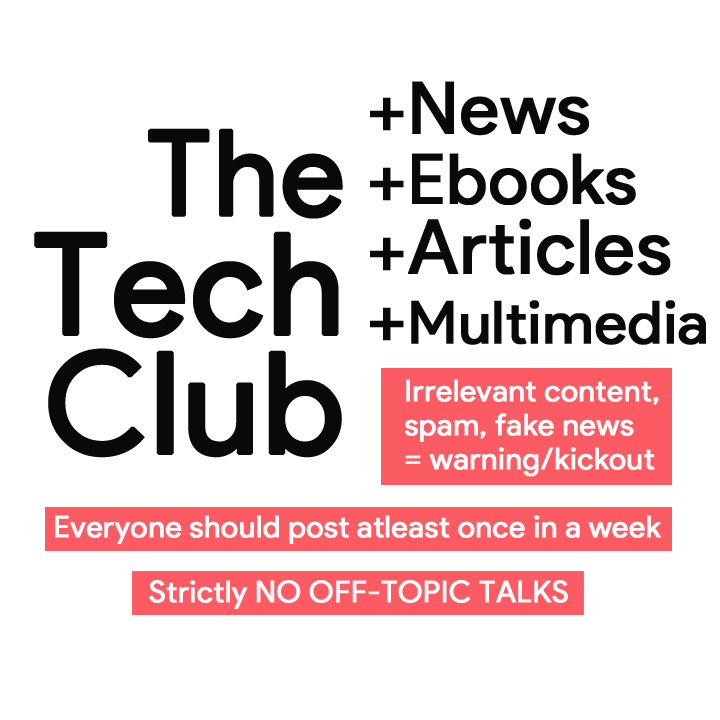
<style>
.page{position:relative;width:720px;height:720px;background:#ffffff}
.page>*{position:absolute;margin:0}
.t1{font:59px/70px "ProductSans-Regular";color:#090909;font-weight:bold}
.t2{font:72px/70px "ProductSans-Regular";color:#090909;font-weight:bold}
.t3{font:69px/70px "ProductSans-Regular";color:#090909;font-weight:bold}
.t4{font:75px/70px "ProductSans-Regular";color:#090909;font-weight:bold}
.t5{font:140px/119px "ProductSans-Regular";color:#090909;font-weight:bold}
.t6{font:118px/119px "ProductSans-Regular";color:#090909;font-weight:bold}
.t7{font:30px/34px "ProductSans-Regular";color:#fdfdfd;font-weight:bold}
.t8{font:30px "ProductSans-Regular";color:#fefdfd;font-weight:bold}
.t9{font:30px "ProductSans-Regular";color:#fdfbfb;font-weight:bold}
</style>
<div class="page">
<p class="t1" style="left:370px;top:81px;width:336px;height:264px"><span class="t2">+News<br>+</span><span class="t3">Ebooks<br></span><span class="t2">+</span><span class="t4">Articles<br></span><span class="t2">+</span>Multimedia</p>
<p class="t5" style="left:34px;top:128px;width:309px;height:330px;text-align:right"><span class="t6">The<br></span>Tech<br>Club</p>
<p class="t7" style="left:404px;top:379px;width:255px;height:98px">Irrelevant content,<br>spam, fake news <br>= warning/kickout</p>
<p class="t8" style="left:55px;top:515px;width:606px;height:29px">Everyone should post atleast once in a week</p>
<p class="t9" style="left:149px;top:580px;width:419px;height:29px">Strictly NO OFF-TOPIC TALKS</p>
</div>
